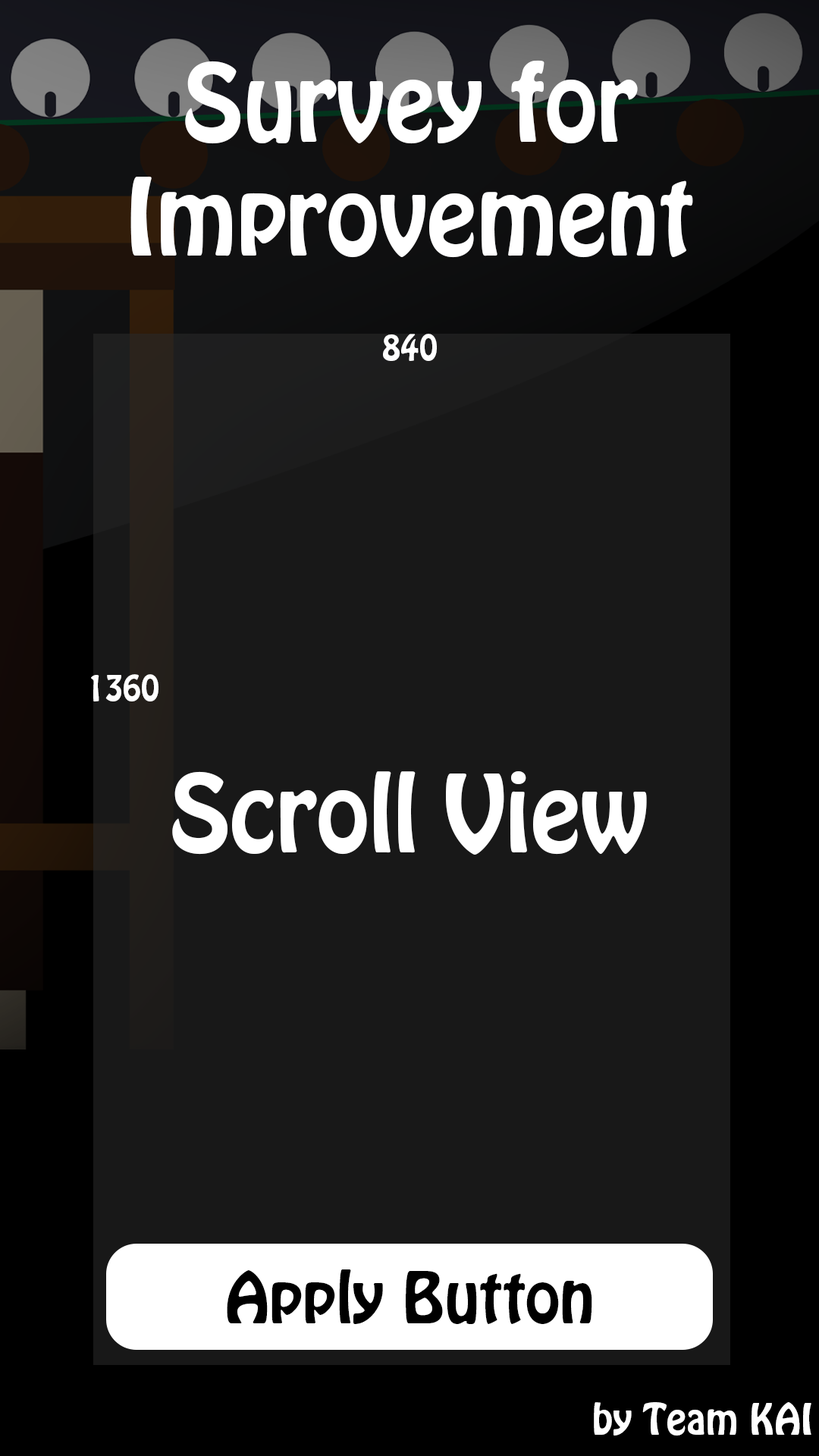
<style>
.page{position:relative;width:819px;height:1456px;background:#181818}
.page>*{position:absolute;margin:0}
.t1{font:94.9px "HoboStd";color:#ffffff}
.t2{font:31.6px "HoboStd";color:#ffffff}
.t3{font:94.8px "HoboStd";color:#ffffff}
.t4{font:63.2px "HoboStd";color:#000000}
.t5{font:37.9px "HoboStd";color:#ffffff}
</style>
<div class="page">
<p class="t1" style="left:130px;top:60px;width:563px;height:198px;text-align:center">Survey for<br>Improvement</p>
<p class="t2" style="left:383px;top:334px;width:54px;height:27px">840</p>
<p class="t2" style="left:91px;top:674px;width:67px;height:27px">1360</p>
<p class="t3" style="left:172px;top:771px;width:475px;height:84px">Scroll View</p>
<p class="t4" style="left:227px;top:1269px;width:365px;height:55px">Apply Button</p>
<p class="t5" style="left:594px;top:1402px;width:217px;height:34px">by Team KAI</p>
</div>
